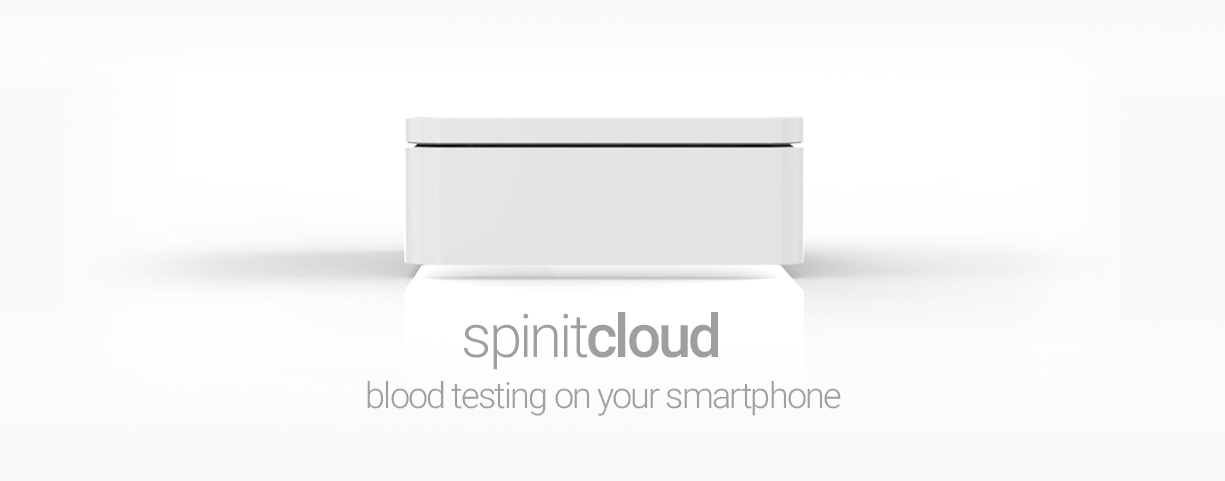
<style>
.page{position:relative;width:1225px;height:481px;background:#fafafa}
.page>*{position:absolute;margin:0}
.t1{font:60px "Roboto-Light";letter-spacing:-0.05em;color:#9f9f9f}
.t2{font:60px "Roboto-Medium";letter-spacing:-0.05em;color:#9f9f9f}
.t3{font:36px "Roboto-Light";letter-spacing:-0.05em;color:#9f9f9f}
</style>
<div class="page">
<p class="t1" style="left:464px;top:312px;width:254px;height:58px">spinit<span class="t2">cloud</span></p>
<p class="t3" style="left:367px;top:380px;width:474px;height:36px">blood testing on your smartphone</p>
</div>
